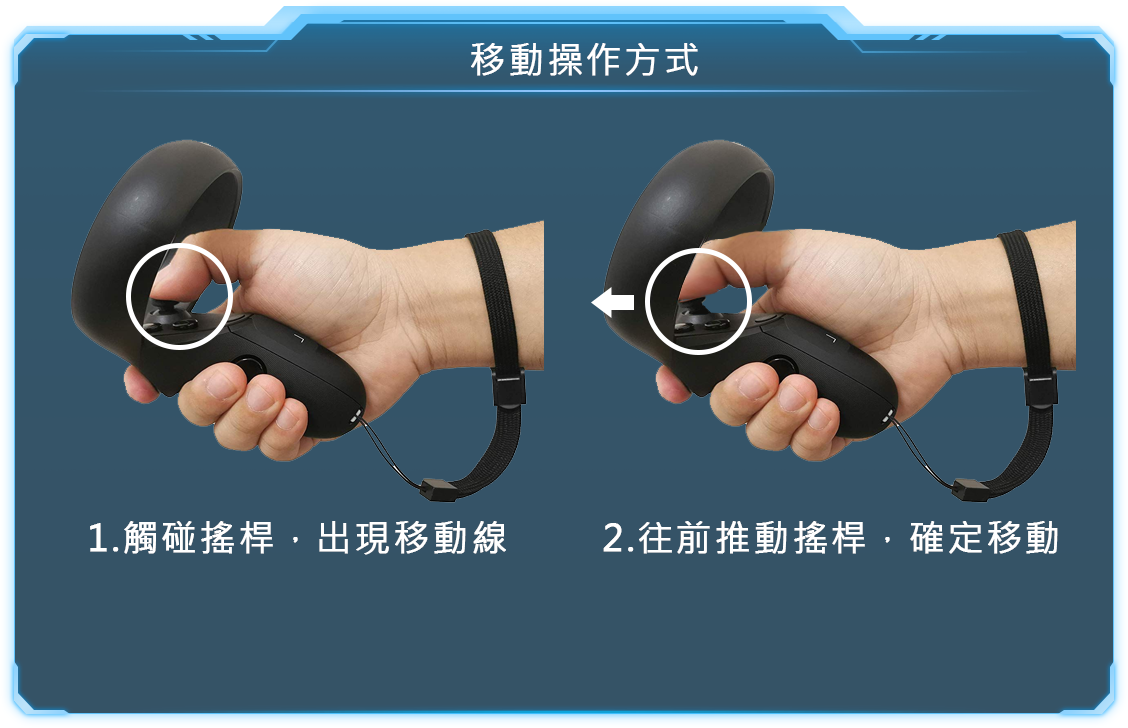
<style>
.page{position:relative;width:1128px;height:728px}
.page>*{position:absolute;margin:0}
.t1{font:36px "MicrosoftJhengHeiRegular";letter-spacing:0.05em;color:#ffffff;font-weight:bold}
</style>
<div class="page">
<p class="t1" style="left:471px;top:43px;width:227px;height:33px">移動操作方式</p>
<p class="t1" style="left:90px;top:521px;width:416px;height:34px">1.觸碰搖桿，出現移動線</p>
<p class="t1" style="left:603px;top:521px;width:455px;height:33px">2.往前推動搖桿，確定移動</p>
</div>
